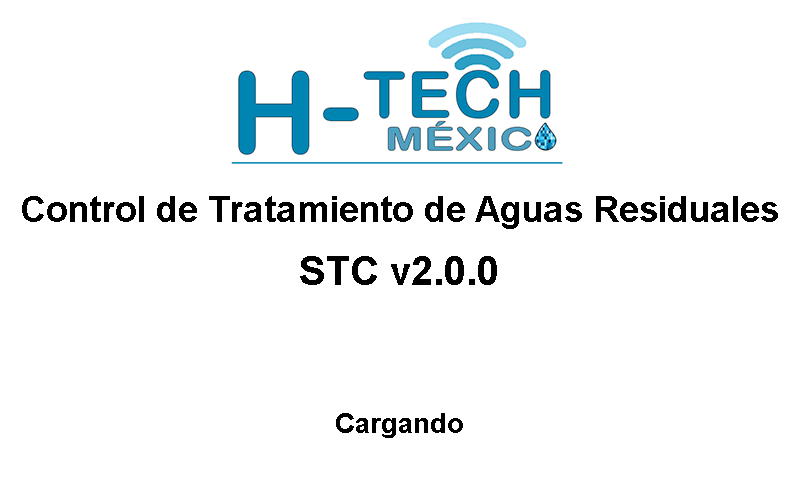
<style>
.page{position:relative;width:800px;height:480px;background:#ffffff}
.page>*{position:absolute;margin:0}
.t1{font:35.6px "Arial-BoldMT";color:#000000}
.t2{font:40px "Arial-BoldMT";color:#000000}
.t3{font:26.7px "Arial-BoldMT";color:#000000}
</style>
<div class="page">
<p class="t1" style="left:22px;top:196px;width:756px;height:33px">Control de Tratamiento de Aguas Residuales</p>
<p class="t2" style="left:300px;top:256px;width:197px;height:29px">STC v2.0.0</p>
<p class="t3" style="left:336px;top:413px;width:127px;height:25px">Cargando</p>
</div>
